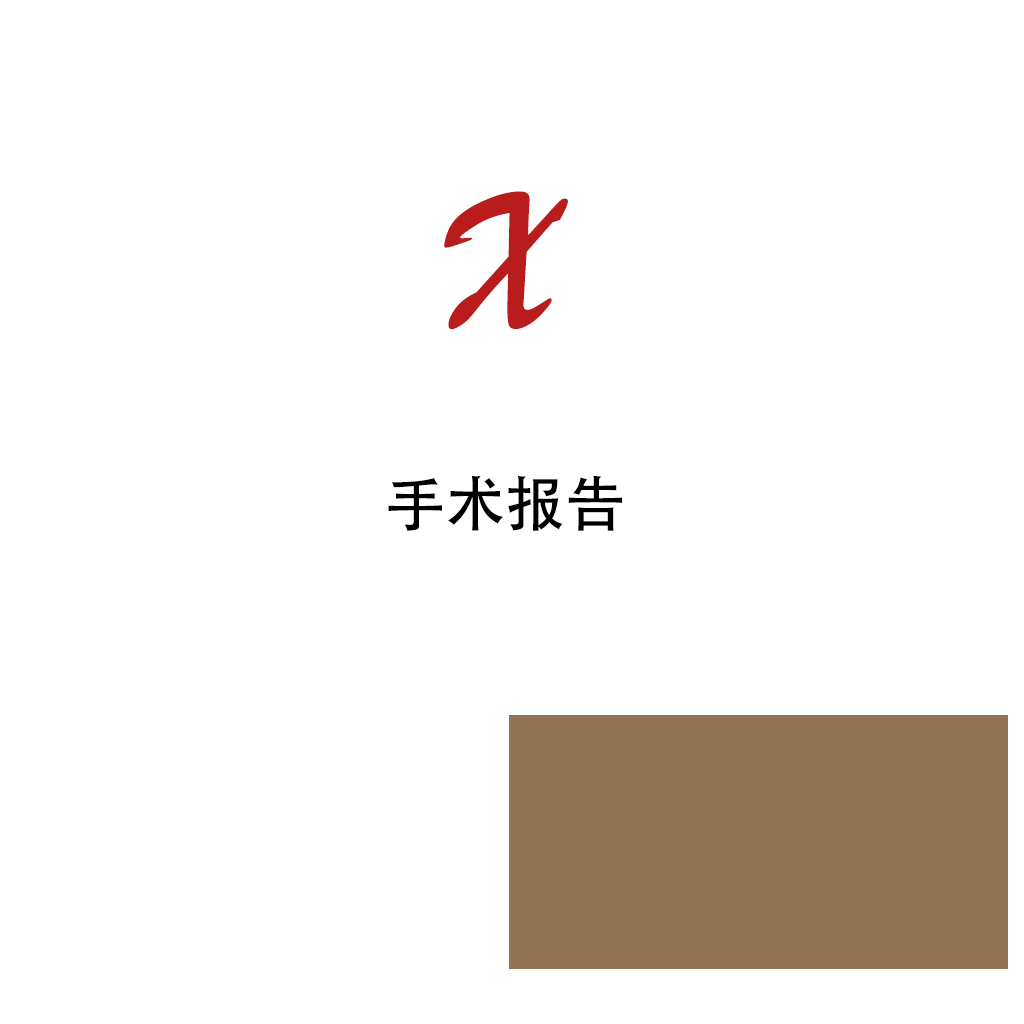
<style>
.page{position:relative;width:1024px;height:1024px;background:#ffffff}
.page>*{position:absolute;margin:0}
.t1{font:200px "STXingkai";color:#b81c1c}
.t2{font:60px "AdobeHeitiStd-Regular";color:#000000}
</style>
<div class="page">
<p class="t1" style="left:444px;top:191px;width:124px;height:139px">X</p>
<p class="t2" style="left:388px;top:475px;width:234px;height:56px">手术报告</p>
</div>
